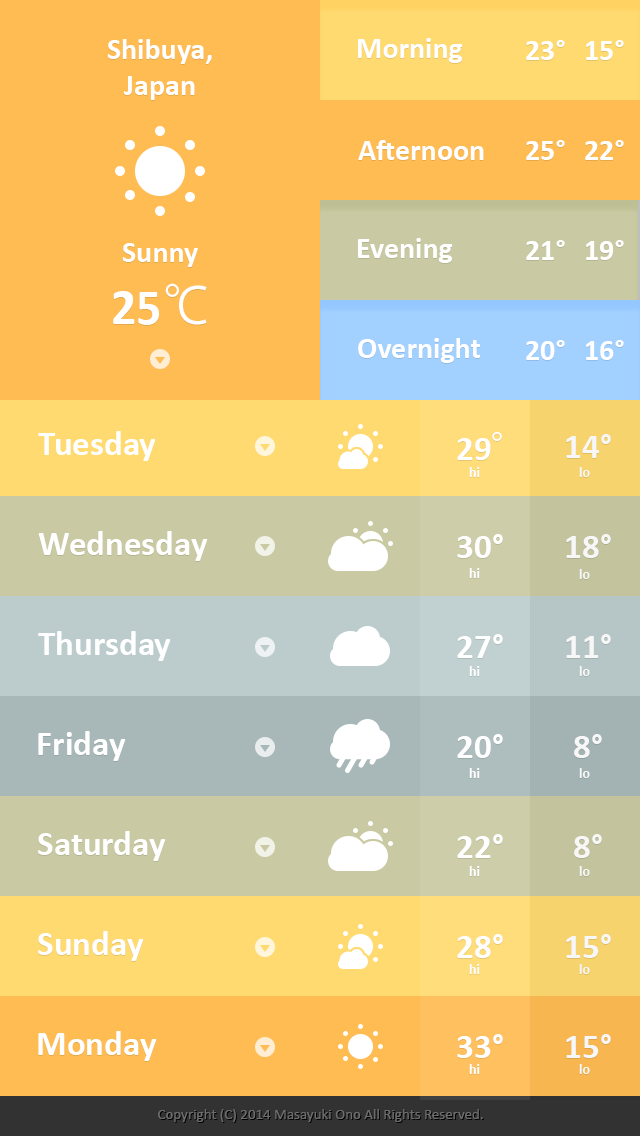
<style>
.page{position:relative;width:640px;height:1136px;background:#ffbc53}
.page>*{position:absolute;margin:0}
.t1{font:30px "Calibri-Bold";color:#ffffff}
.t2{font:50px "Calibri-Bold";color:#ffffff}
.t3{font:50px "KozGoPr6N-Regular";color:#ffffff}
.t4{font:35px "Calibri-Bold";color:#ffffff}
.t5{font:35px "KozGoPr6N-Regular";color:#ffffff}
.t6{font:14px "Calibri-Bold";color:#ffffff}
.t7{font:15px "Calibri";color:#6d6d6d}
</style>
<div class="page">
<p class="t1" style="left:107px;top:39px;width:105px;height:61px;text-align:center">Shibuya,<br>Japan</p>
<p class="t1" style="left:358px;top:38px;width:105px;height:25px">Morning</p>
<p class="t1" style="left:526px;top:40px;width:39px;height:20px">23°</p>
<p class="t1" style="left:586px;top:40px;width:38px;height:20px">15°</p>
<p class="t1" style="left:358px;top:140px;width:126px;height:20px">Afternoon</p>
<p class="t1" style="left:526px;top:140px;width:39px;height:20px">25°</p>
<p class="t1" style="left:585px;top:140px;width:39px;height:20px">22°</p>
<p class="t1" style="left:122px;top:243px;width:76px;height:24px">Sunny</p>
<p class="t1" style="left:358px;top:238px;width:95px;height:25px">Evening</p>
<p class="t1" style="left:526px;top:240px;width:39px;height:20px">21°</p>
<p class="t1" style="left:586px;top:240px;width:38px;height:20px">19°</p>
<p class="t2" style="left:113px;top:283px;width:94px;height:42px">25<span class="t3">℃</span></p>
<p class="t1" style="left:358px;top:338px;width:123px;height:25px">Overnight</p>
<p class="t1" style="left:526px;top:340px;width:39px;height:20px">20°</p>
<p class="t1" style="left:586px;top:340px;width:38px;height:20px">16°</p>
<p class="t4" style="left:38px;top:431px;width:118px;height:30px">Tuesday</p>
<p class="t4" style="left:457px;top:432px;width:45px;height:28px">29<span class="t5">°</span></p>
<p class="t4" style="left:566px;top:434px;width:45px;height:24px">14°</p>
<p class="t6" style="left:469px;top:467px;width:11px;height:10px">hi</p>
<p class="t6" style="left:579px;top:467px;width:11px;height:10px">lo</p>
<p class="t4" style="left:38px;top:531px;width:170px;height:30px">Wednesday</p>
<p class="t4" style="left:457px;top:534px;width:46px;height:24px">30°</p>
<p class="t4" style="left:566px;top:534px;width:45px;height:24px">18°</p>
<p class="t6" style="left:469px;top:568px;width:11px;height:10px">hi</p>
<p class="t6" style="left:579px;top:569px;width:11px;height:10px">lo</p>
<p class="t4" style="left:38px;top:631px;width:133px;height:30px">Thursday</p>
<p class="t4" style="left:457px;top:634px;width:46px;height:24px">27°</p>
<p class="t4" style="left:566px;top:634px;width:45px;height:24px">11°</p>
<p class="t6" style="left:469px;top:666px;width:11px;height:10px">hi</p>
<p class="t6" style="left:579px;top:666px;width:11px;height:10px">lo</p>
<p class="t4" style="left:38px;top:731px;width:88px;height:30px">Friday</p>
<p class="t4" style="left:457px;top:734px;width:46px;height:24px">20°</p>
<p class="t4" style="left:574px;top:734px;width:28px;height:24px">8°</p>
<p class="t6" style="left:469px;top:768px;width:11px;height:10px">hi</p>
<p class="t6" style="left:579px;top:768px;width:11px;height:10px">lo</p>
<p class="t4" style="left:38px;top:831px;width:128px;height:30px">Saturday</p>
<p class="t4" style="left:457px;top:834px;width:46px;height:24px">22°</p>
<p class="t4" style="left:574px;top:834px;width:28px;height:24px">8°</p>
<p class="t6" style="left:469px;top:866px;width:11px;height:10px">hi</p>
<p class="t6" style="left:579px;top:866px;width:11px;height:10px">lo</p>
<p class="t4" style="left:38px;top:931px;width:106px;height:30px">Sunday</p>
<p class="t4" style="left:457px;top:934px;width:46px;height:24px">28°</p>
<p class="t4" style="left:566px;top:934px;width:45px;height:24px">15°</p>
<p class="t6" style="left:469px;top:964px;width:11px;height:10px">hi</p>
<p class="t6" style="left:579px;top:964px;width:11px;height:10px">lo</p>
<p class="t4" style="left:38px;top:1031px;width:119px;height:30px">Monday</p>
<p class="t4" style="left:457px;top:1034px;width:46px;height:24px">33°</p>
<p class="t4" style="left:566px;top:1034px;width:45px;height:24px">15°</p>
<p class="t6" style="left:469px;top:1064px;width:11px;height:10px">hi</p>
<p class="t6" style="left:579px;top:1064px;width:11px;height:10px">lo</p>
<p class="t7" style="left:158px;top:1109px;width:325px;height:13px">Copyright (C) 2014 Masayuki Ono All Rights Reserved.</p>
</div>
